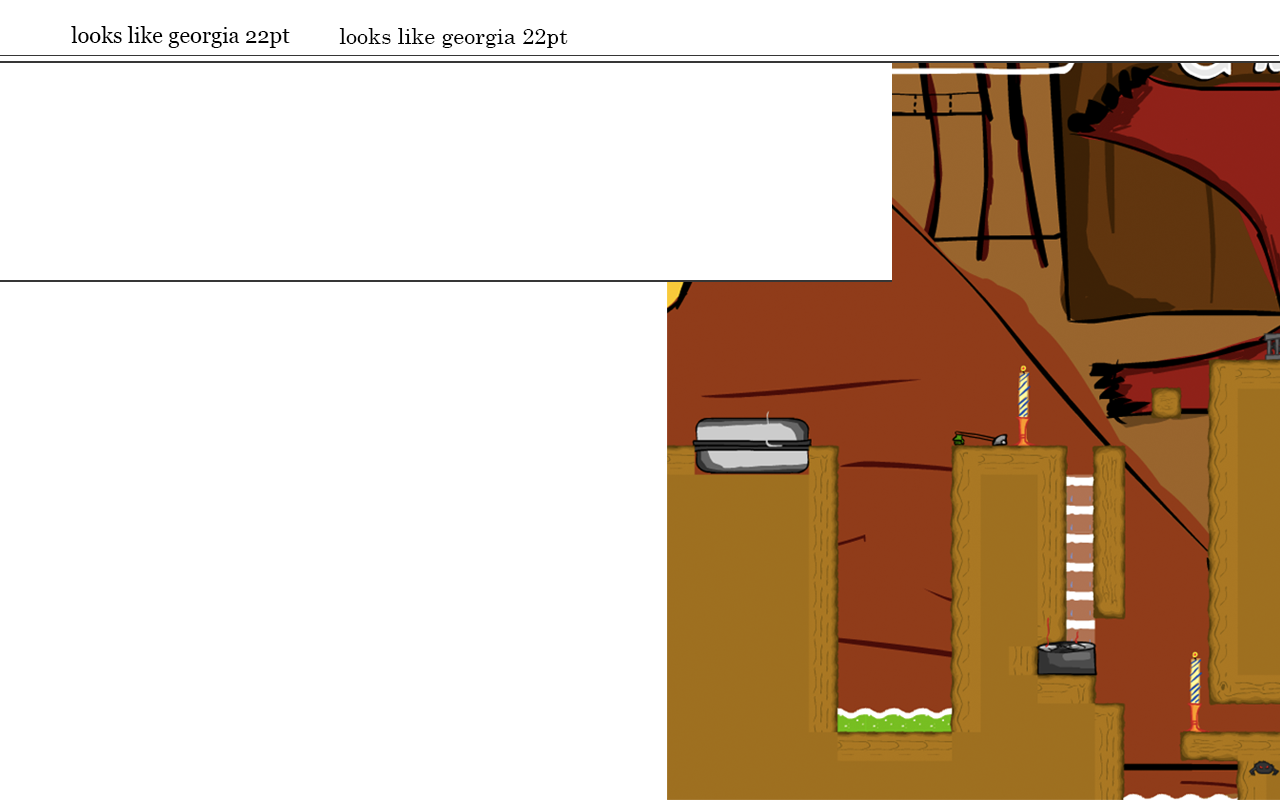
<style>
.page{position:relative;width:1280px;height:800px;background:#ffffff}
.page>*{position:absolute;margin:0}
.t1{font:22px "Georgia";color:#000000}
.t2{font:22px "Century";color:#000000}
</style>
<div class="page">
<p class="t1" style="left:71px;top:26px;width:219px;height:22px">looks like georgia 22pt</p>
<p class="t2" style="left:339px;top:28px;width:229px;height:20px">looks like georgia 22pt</p>
</div>
